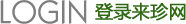
<style>
.page{position:relative;width:186px;height:24px;background:#ffffff}
.page>*{position:absolute;margin:0}
.t1{font:18px "MicrosoftYaHei";color:#2f6914;font-weight:bold}
</style>
<div class="page">
<p class="t1" style="left:95px;top:2px;width:91px;height:19px">登录来珍网</p>
</div>
